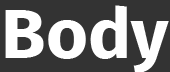
<style>
.page{position:relative;width:170px;height:72px;background:#333333}
.page>*{position:absolute;margin:0}
.t1{font:68.4px "FiraSans-Bold";color:#ffffff;scale:1.05 1}
</style>
<div class="page">
<p class="t1" style="left:5px;top:5px;width:164px;height:68px">Body</p>
</div>
